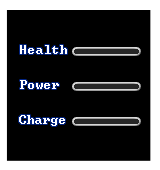
<style>
.page{position:relative;width:160px;height:170px;background:#000000}
.page>*{position:absolute;margin:0}
.t1{font:14px "Terminal";color:#ffffff}
</style>
<div class="page">
<p class="t1" style="left:20px;top:45px;width:47px;height:9px">Health</p>
<p class="t1" style="left:20px;top:80px;width:39px;height:9px">Power</p>
<p class="t1" style="left:19px;top:115px;width:46px;height:11px">Charge</p>
</div>
